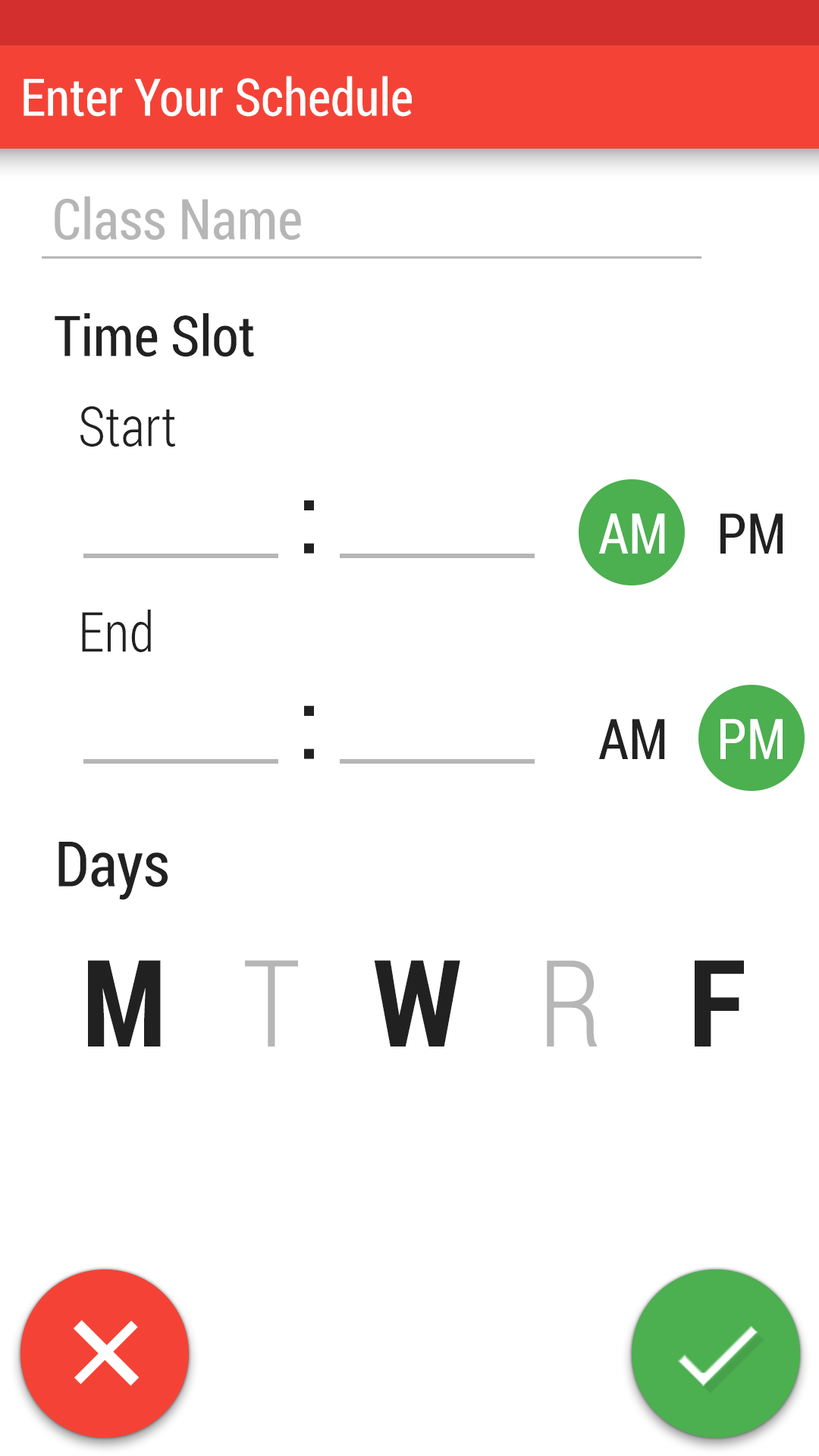
<style>
.page{position:relative;width:819px;height:1456px;background:#ffffff}
.page>*{position:absolute;margin:0}
.t1{font:51.8px "RobotoCondensed-Regular";color:#ffffff;scale:0.97 1}
.t2{font:56.2px "RobotoCondensed-Regular";color:#b6b6b6}
.t3{font:56.2px "RobotoCondensed-Regular";color:#212121}
.t4{font:55.2px "RobotoCondensed-Light";color:#212121;scale:0.96 1}
.t5{font:100.2px "RobotoCondensed-Regular";color:#212121}
.t6{font:56.2px "RobotoCondensed-Regular";color:#ffffff}
.t7{font:62.6px "RobotoCondensed-Regular";color:#212121}
.t8{font:121px "RobotoCondensed-Bold";color:#212121;scale:0.96 1}
.t9{font:121px "RobotoCondensed-Light";color:#b6b6b6;scale:0.96 1}
.t10{font:155.7px "RobotoCondensed-Light";color:#ffffff;scale:1.21 1}
.t11{font:97.3px "RobotoCondensed-Regular";color:#ffffff;scale:1.21 1}
</style>
<div class="page">
<p class="t1" style="left:24px;top:76px;width:388px;height:41px">Enter Your Schedule</p>
<p class="t2" style="left:55px;top:196px;width:246px;height:44px">Class Name</p>
<p class="t3" style="left:55px;top:313px;width:199px;height:44px">Time Slot</p>
<p class="t4" style="left:80px;top:406px;width:95px;height:41px">Start</p>
<p class="t5" style="left:304px;top:500px;width:10px;height:54px">:</p>
<p class="t6" style="left:599px;top:513px;width:66px;height:41px">AM</p>
<p class="t3" style="left:720px;top:513px;width:63px;height:41px">PM</p>
<p class="t4" style="left:82px;top:609px;width:69px;height:43px">End</p>
<p class="t5" style="left:304px;top:705px;width:10px;height:54px">:</p>
<p class="t3" style="left:599px;top:719px;width:66px;height:40px">AM</p>
<p class="t6" style="left:720px;top:719px;width:63px;height:40px">PM</p>
<p class="t7" style="left:58px;top:842px;width:110px;height:58px">Days</p>
<p class="t8" style="left:88px;top:960px;width:73px;height:86px">M</p>
<p class="t9" style="left:245px;top:960px;width:53px;height:86px">T</p>
<p class="t8" style="left:374px;top:960px;width:86px;height:86px">W</p>
<p class="t9" style="left:547px;top:960px;width:50px;height:86px">R</p>
<p class="t8" style="left:695px;top:960px;width:49px;height:86px">F</p>
<p class="t10" style="left:74px;top:1320px;width:65px;height:66px;rotate:-45deg"><span class="t11"><br><br><br><br><br><br><br><br><br></span>+</p>
</div>
